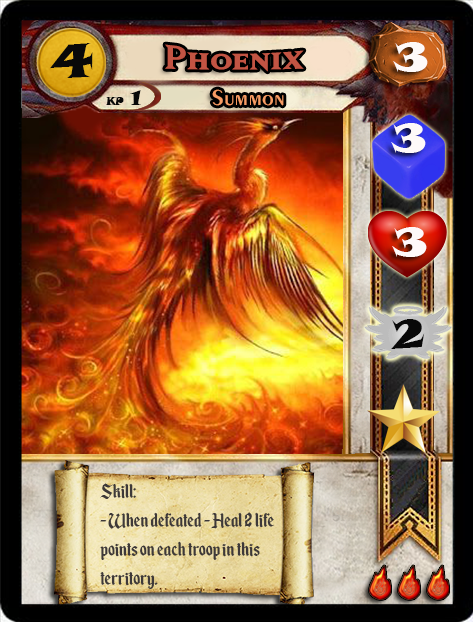
<style>
.page{position:relative;width:473px;height:622px}
.page>*{position:absolute;margin:0}
.t1{font:46.6px "SnapITC-Regular";color:#090909;scale:1.05 1}
.t2{font:40px "MatrixBoldSmallCaps";color:#c25443;scale:1.06 1}
.t3{font:40px "SnapITC-Regular";color:#fef9f9;scale:1.05 1}
.t4{font:22.7px "Exotic350BT-DemiBold";color:#f89c64;scale:1.06 1}
.t5{font:20.5px "SnapITC-Regular";color:#090909}
.t6{font:40px "SnapITC-Regular";color:#090909;scale:1.05 1}
.t7{font:24px "EnchantedLand";color:#3e3939}
</style>
<div class="page">
<p class="t1" style="left:50px;top:43px;width:43px;height:35px">4</p>
<p class="t2" style="left:165px;top:44px;width:139px;height:28px">Phoenix</p>
<p class="t3" style="left:393px;top:42px;width:35px;height:30px">3</p>
<p class="t4" style="left:212px;top:89px;width:72px;height:17px">Summon</p>
<p class="t5" style="left:130px;top:90px;width:11px;height:15px">1</p>
<p class="t3" style="left:391px;top:123px;width:35px;height:30px">3</p>
<p class="t3" style="left:392px;top:227px;width:35px;height:30px">3</p>
<p class="t6" style="left:391px;top:319px;width:34px;height:30px">2</p>
<p class="t7" style="left:100px;top:483px;width:174px;height:106px">Skill:<br>- When defeated - Heal 2 life points on each troop in this territory.</p>
</div>
